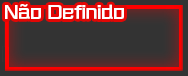
<style>
.page{position:relative;width:188px;height:76px;background:#333333}
.page>*{position:absolute;margin:0}
.t1{font:16px "KafuTechnoStd-HV";letter-spacing:-0.002em;color:#ffffff}
</style>
<div class="page">
<p class="t1" style="left:5px;top:4px;width:119px;height:15px">Não Definido</p>
</div>
